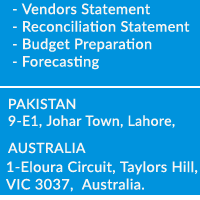
<style>
.page{position:relative;width:200px;height:200px;background:#0093dd}
.page>*{position:absolute;margin:0}
.t1{font:14.5px "Lato-Medium";letter-spacing:0.025em;color:#f8f5f2}
.t2{font:14px "Lato-Medium";letter-spacing:0.025em;color:#f8f5f2}
</style>
<div class="page">
<p class="t1" style="left:13px;top:3px;width:177px;height:67px">- Vendors Statement<br>- Reconciliation Statement<br>- Budget Preparation<br>- Forecasting</p>
<p class="t2" style="left:8px;top:98px;width:167px;height:30px">PAKISTAN<br>9-E1, Johar Town, Lahore,</p>
<p class="t2" style="left:8px;top:142px;width:78px;height:12px">AUSTRALIA</p>
<p class="t1" style="left:6px;top:161px;width:192px;height:31px">1-Eloura Circuit, Taylors Hill,<br>VIC 3037,  Australia.</p>
</div>
